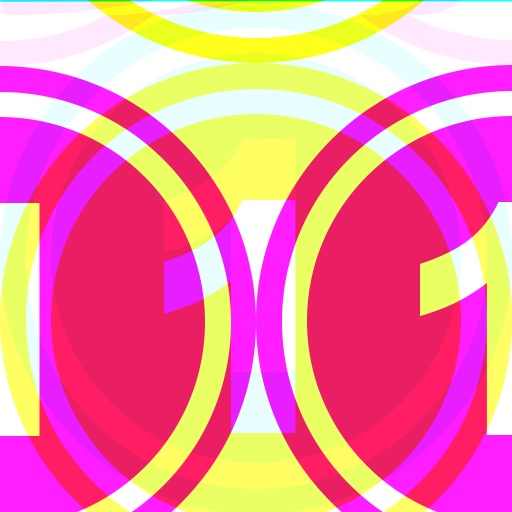
<style>
.page{position:relative;width:512px;height:512px;background:#e91e63}
.page>*{position:absolute;margin:0}
.t1{font:320px "Arial-Black"}
</style>
<div class="page">
<p class="t1" style="left:164px;top:137px;width:132px;height:233px">1</p>
</div>
